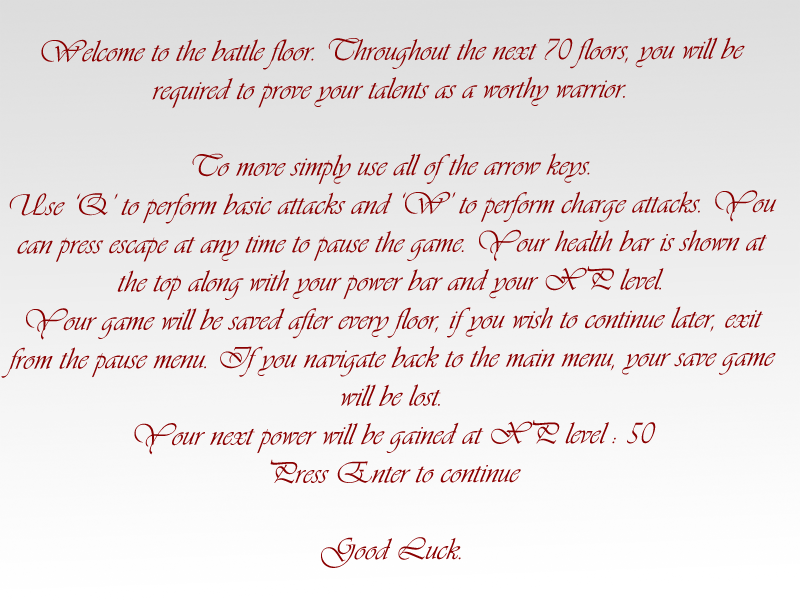
<style>
.page{position:relative;width:800px;height:600px}
.page>*{position:absolute;margin:0}
.t1{font:32px "Vivaldii";color:#8a0000}
</style>
<div class="page">
<p class="t1" style="left:1px;top:37px;width:776px;height:531px;text-align:center">Welcome to the battle floor. Throughout the next 70 floors, you will be required to prove your talents as a worthy warrior.<br><br>To move simply use all of the arrow keys.<br>Use ‘Q’ to perform basic attacks and ‘W’ to perform charge attacks. You can press escape at any time to pause the game. Your health bar is shown at the top along with your power bar and your XP level.<br>Your game will be saved after every floor, if you wish to continue later, exit from the pause menu. If you navigate back to the main menu, your save game will be lost.<br>Your next power will be gained at XP level : 50<br>Press Enter to continue<br><br>Good Luck.</p>
</div>
